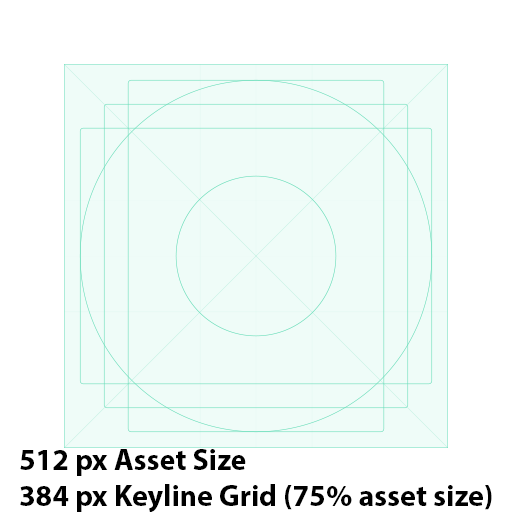
<style>
.page{position:relative;width:512px;height:512px;background:#effcf8}
.page>*{position:absolute;margin:0}
.t1{font:30px "MyriadPro-Bold";color:#000000}
</style>
<div class="page">
<p class="t1" style="left:20px;top:449px;width:472px;height:64px">512 px Asset Size<br>384 px Keyline Grid (75% asset size)</p>
</div>
